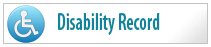
<style>
.page{position:relative;width:211px;height:47px;background:#ffffff}
.page>*{position:absolute;margin:0}
.t1{font:24px "MyriadPro-SemiboldCond";color:#11839a;scale:0.78 1}
</style>
<div class="page">
<p class="t1" style="left:58px;top:13px;width:102px;height:22px">Disability Record</p>
</div>
